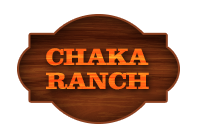
<style>
.page{position:relative;width:200px;height:139px;background:#ffffff}
.page>*{position:absolute;margin:0}
.t1{font:22.5px/23.2px "Clarendon";color:#ff6b17}
</style>
<div class="page">
<p class="t1" style="left:46px;top:48px;width:103px;height:42px">CHAKA<br>RANCH</p>
</div>
